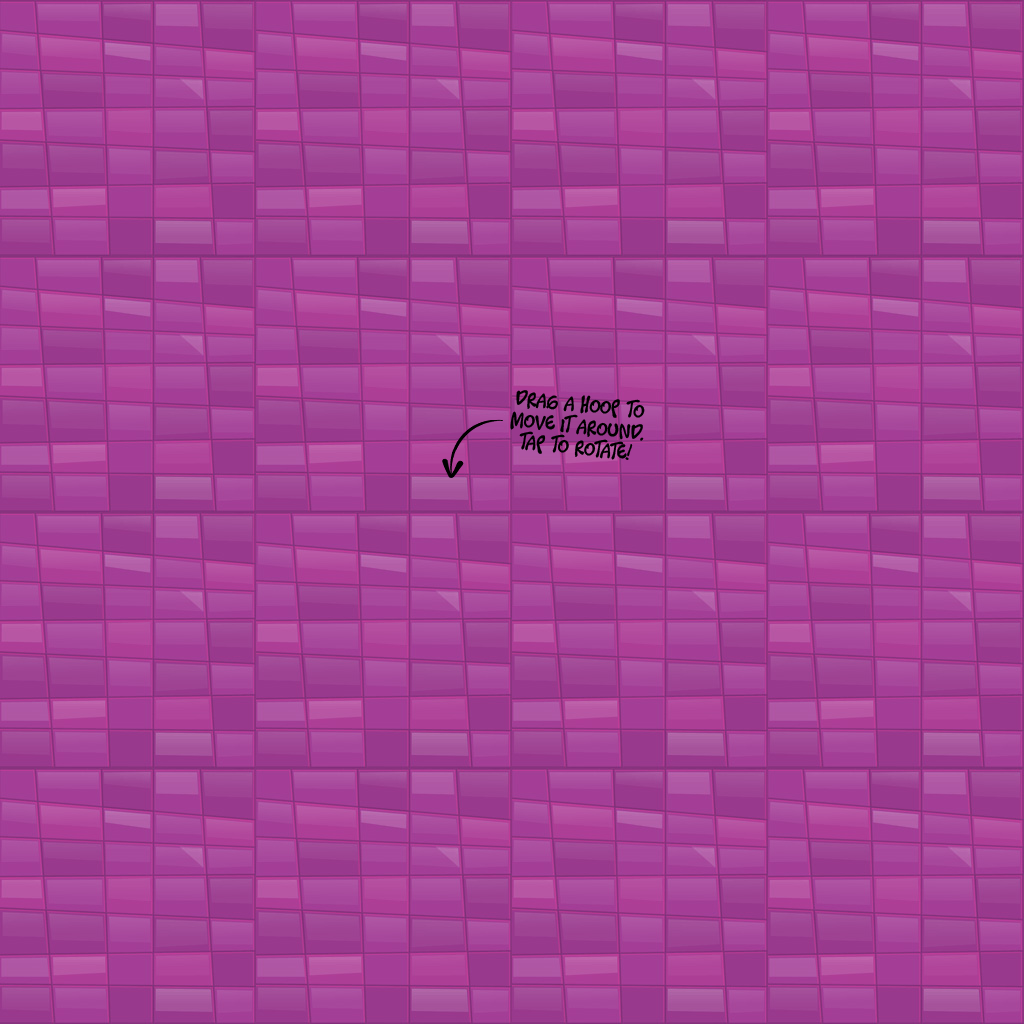
<style>
.page{position:relative;width:1024px;height:1024px}
.page>*{position:absolute;margin:0}
.t1{font:18px "Timotheos";letter-spacing:0.025em;color:#000000}
</style>
<div class="page">
<p class="t1" style="left:510px;top:390px;width:135px;height:70px;text-align:center;rotate:6deg">DRAG A HOOP TO<br>MOVE IT AROUND.<br>tap to rotate!</p>
</div>
